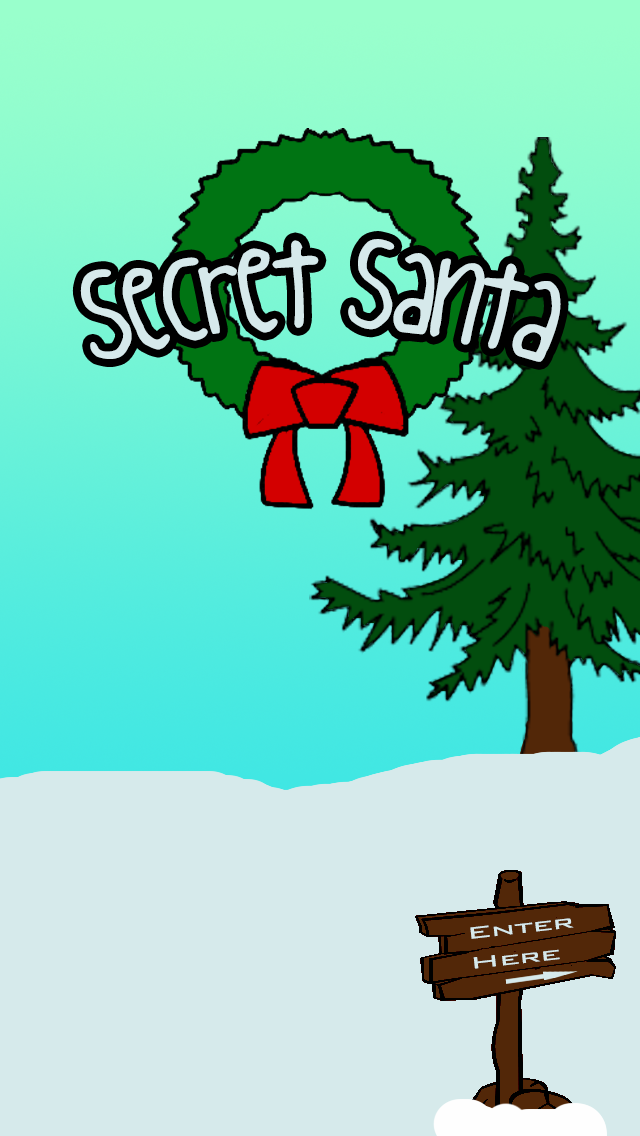
<style>
.page{position:relative;width:640px;height:1136px;background:#d6eaeb}
.page>*{position:absolute;margin:0}
.t1{font:110px "kingcooLKC";letter-spacing:-0.025em;color:#d6e9eb;scale:0.91 1}
.t2{font:21.6px/30px "BankGothicBT-Light";letter-spacing:-0.025em;color:#d6e9eb;scale:1.67 1}
</style>
<div class="page">
<p class="t1" style="left:80px;top:239px;width:481px;height:123px">Secret Santa</p>
<p class="t2" style="left:470px;top:918px;width:104px;height:51px;rotate:-6deg">Enter <br>Here</p>
</div>
